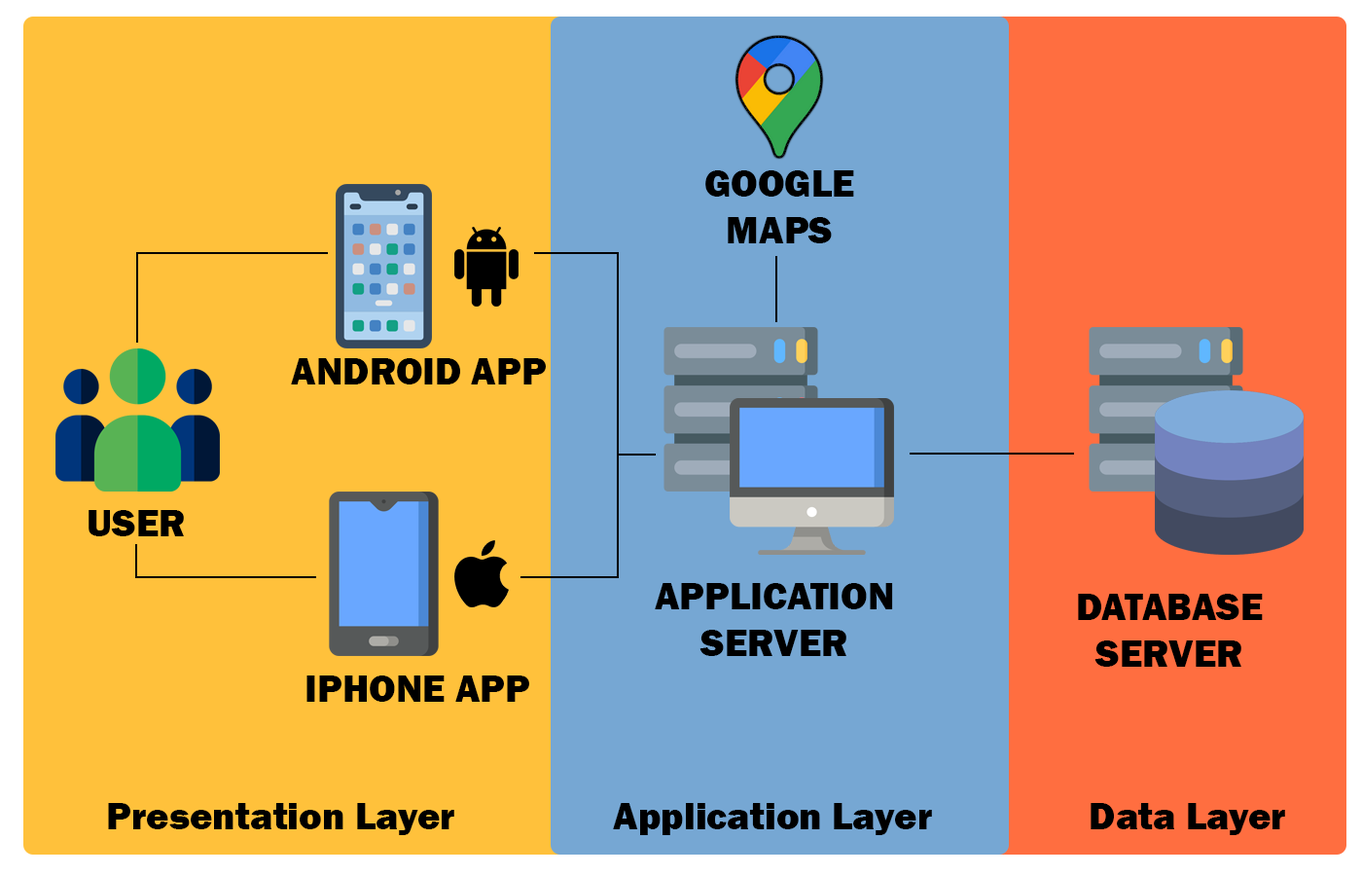
<style>
.page{position:relative;width:1362px;height:876px;background:#ffc13b}
.page>*{position:absolute;margin:0}
.t1{font:38.9px "FranklinGothic-Heavy";color:#000000}
</style>
<div class="page">
<p class="t1" style="left:705px;top:170px;width:149px;height:73px;text-align:center">GOOGLE<br>MAPS</p>
<p class="t1" style="left:291px;top:358px;width:255px;height:26px">ANDROID APP</p>
<p class="t1" style="left:89px;top:510px;width:95px;height:26px">USER</p>
<p class="t1" style="left:655px;top:583px;width:238px;height:73px;text-align:center">APPLICATION<br>SERVER</p>
<p class="t1" style="left:1078px;top:593px;width:185px;height:73px;text-align:center">DATABASE<br>SERVER</p>
<p class="t1" style="left:306px;top:675px;width:223px;height:26px">IPHONE APP</p>
<p class="t1" style="left:108px;top:803px;width:346px;height:32px">Presentation Layer</p>
<p class="t1" style="left:613px;top:803px;width:319px;height:32px">Application Layer</p>
<p class="t1" style="left:1091px;top:803px;width:194px;height:32px">Data Layer</p>
</div>
